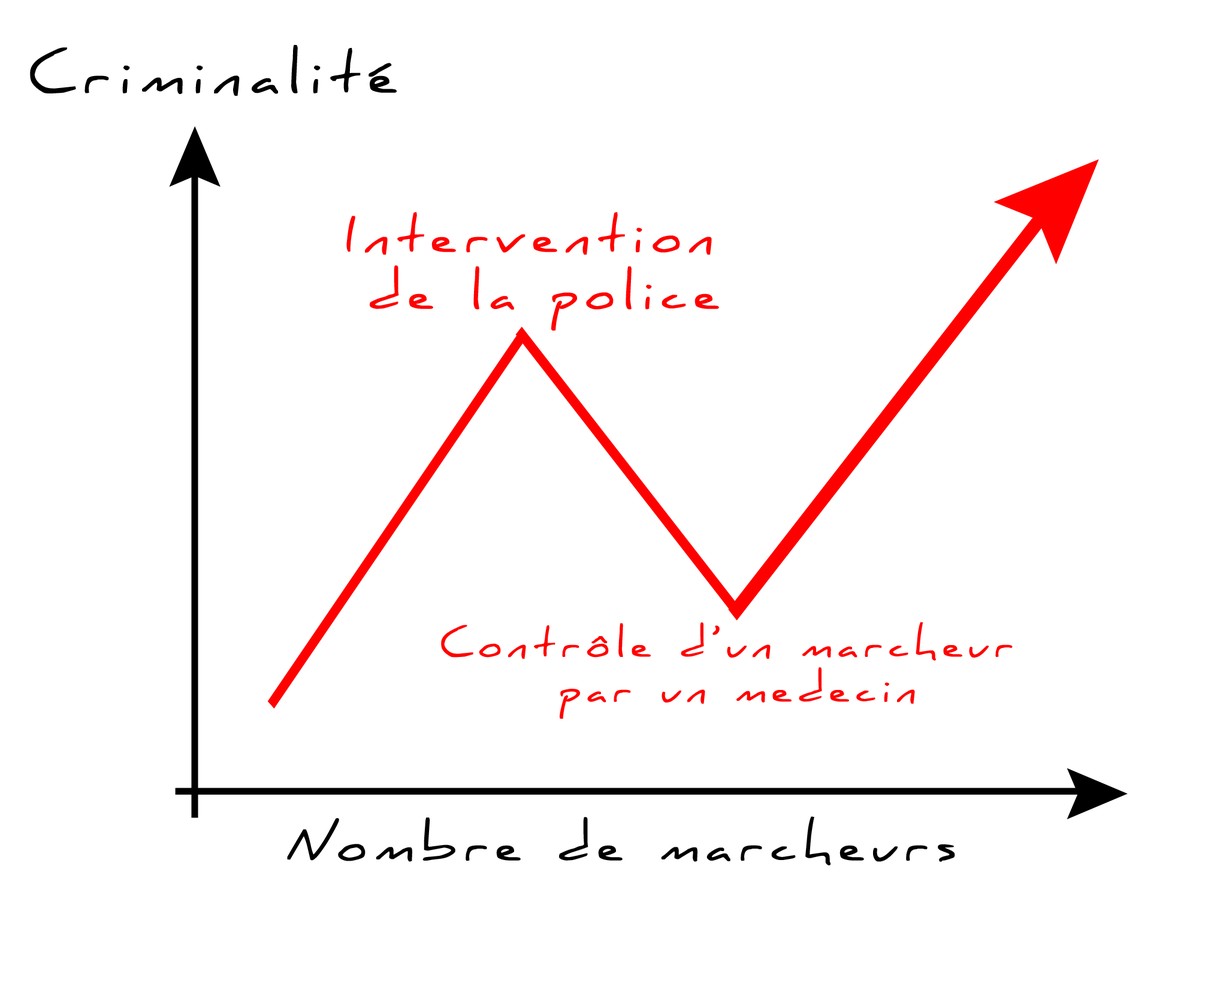
<style>
.page{position:relative;width:1208px;height:987px;background:#ffffff}
.page>*{position:absolute;margin:0}
.t1{font:53.3px "Daniel";letter-spacing:0.16em;color:#000000;font-weight:bold}
.t2{font:47.4px "Daniel";letter-spacing:0.16em;color:#ff0000;font-weight:bold}
.t3{font:37.4px "Daniel";letter-spacing:0.16em;color:#ff0000;font-weight:bold}
.t4{font:47.4px "Daniel";letter-spacing:0.16em;color:#000000;font-weight:bold}
</style>
<div class="page">
<p class="t1" style="left:30px;top:45px;width:367px;height:51px">Criminalité</p>
<p class="t2" style="left:346px;top:212px;width:373px;height:119px;text-align:center">Intervention <br>de la police</p>
<p class="t3" style="left:441px;top:622px;width:571px;height:98px;text-align:center">Contrôle d’un marcheur <br>par un medecin</p>
<p class="t4" style="left:287px;top:817px;width:668px;height:49px">Nombre de marcheurs</p>
</div>
